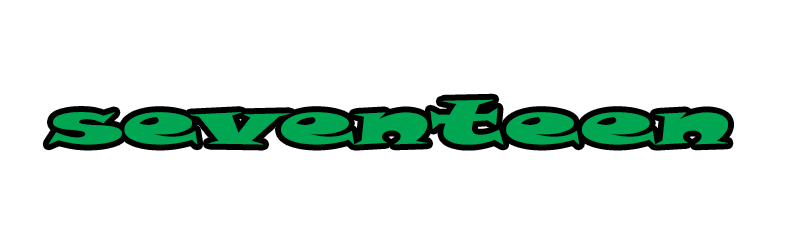
<style>
.page{position:relative;width:812px;height:249px;background:#ffffff}
.page>*{position:absolute;margin:0}
.t1{font:60px "SnapITC-Regular";color:#00a651;scale:2 1}
</style>
<div class="page">
<p class="t1" style="left:48px;top:99px;width:680px;height:46px">seventeen</p>
</div>
